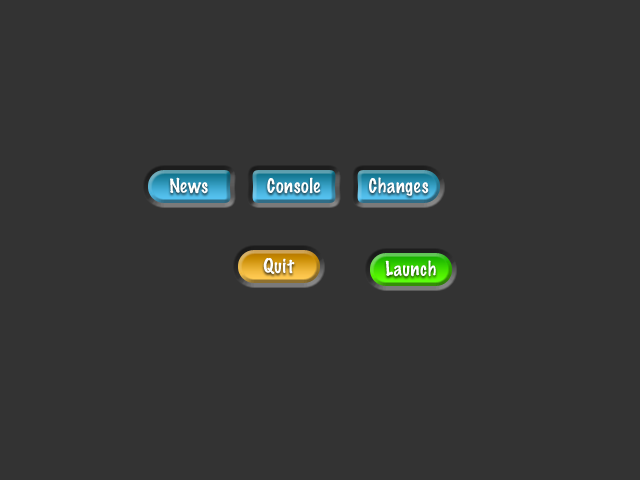
<style>
.page{position:relative;width:640px;height:480px;background:#333333}
.page>*{position:absolute;margin:0}
.t1{font:18px "MarkerFelt-Thin";color:#fdfefe}
</style>
<div class="page">
<p class="t1" style="left:170px;top:177px;width:38px;height:17px">News</p>
<p class="t1" style="left:267px;top:177px;width:54px;height:17px">Console</p>
<p class="t1" style="left:369px;top:177px;width:60px;height:19px">Changes</p>
<p class="t1" style="left:263px;top:258px;width:32px;height:16px">Quit</p>
<p class="t1" style="left:385px;top:260px;width:51px;height:17px">Launch</p>
</div>
